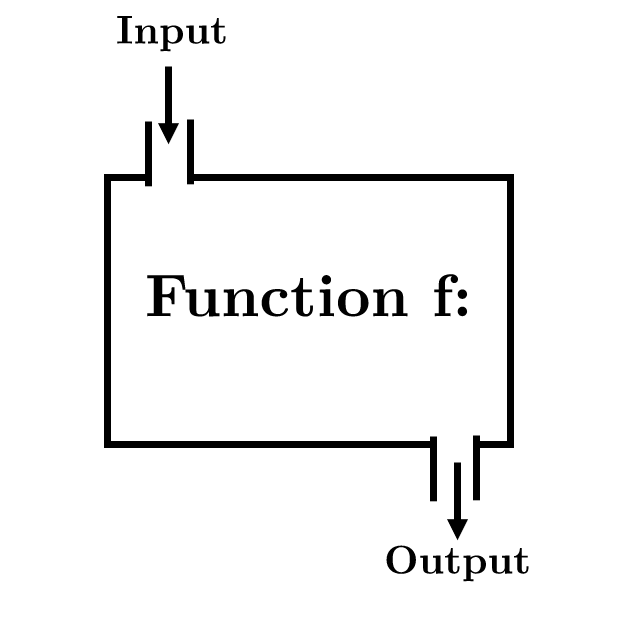
<style>
.page{position:relative;width:625px;height:634px;background:#ffffff}
.page>*{position:absolute;margin:0}
.t1{font:40px "LMRoman10-Bold";color:#000000}
.t2{font:60px "LMRoman10-Bold";color:#000000}
</style>
<div class="page">
<p class="t1" style="left:117px;top:16px;width:109px;height:36px">Input</p>
<p class="t2" style="left:147px;top:274px;width:321px;height:43px">Function f:</p>
<p class="t1" style="left:386px;top:545px;width:143px;height:37px">Output</p>
</div>
